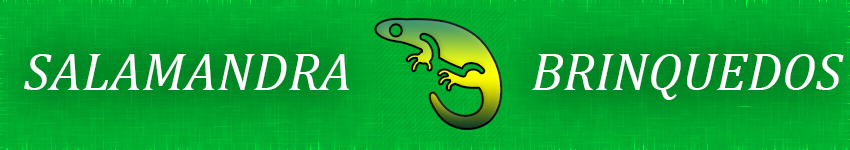
<style>
.page{position:relative;width:850px;height:150px}
.page>*{position:absolute;margin:0}
.t1{font:54.1px "Cambria-Italic";color:#ffffff}
</style>
<div class="page">
<p class="t1" style="left:24px;top:54px;width:326px;height:36px">SALAMANDRA</p>
<p class="t1" style="left:532px;top:54px;width:312px;height:46px">BRINQUEDOS</p>
</div>
